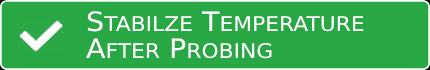
<style>
.page{position:relative;width:430px;height:70px;background:#28a745}
.page>*{position:absolute;margin:0}
.t1{font:26.7px/27px "SegoeUI";color:#ffffff;font-variant:small-caps;scale:1.07 1}
</style>
<div class="page">
<p class="t1" style="left:86px;top:11px;width:278px;height:48px">Stabilze Temperature<br>After Probing</p>
</div>
